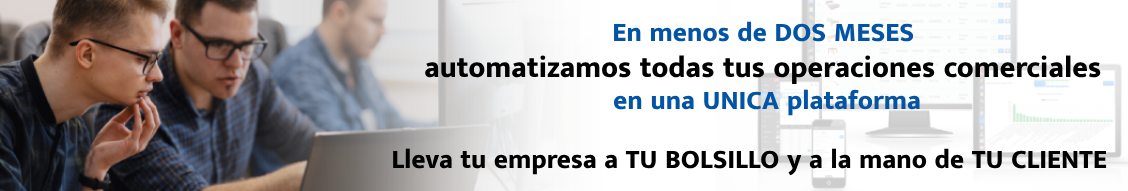
<style>
.page{position:relative;width:1128px;height:191px}
.page>*{position:absolute;margin:0}
.t1{font:30px "MuktaMalar-ExtraBold";color:#000000}
.t2{font:27px "MuktaMalar-ExtraBold";color:#0354a4}
.t3{font:27px "MuktaMalar-ExtraBold";color:#000000}
</style>
<div class="page">
<p class="t1" style="left:425px;top:21px;width:676px;height:95px;text-align:center"><span class="t2">En menos de DOS MESES <br></span>automatizamos todas tus operaciones comerciales <br><span class="t2">en una UNICA plataforma</span></p>
<p class="t3" style="left:393px;top:148px;width:714px;height:28px">Lleva tu empresa a TU BOLSILLO y a la mano de TU CLIENTE</p>
</div>
